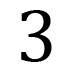
<style>
.page{position:relative;width:72px;height:72px;background:#ffffff}
.page>*{position:absolute;margin:0}
.t1{font:75px "CambriaMath";color:#000000}
</style>
<div class="page">
<p class="t1" style="left:21px;top:10px;width:31px;height:52px">3</p>
</div>
